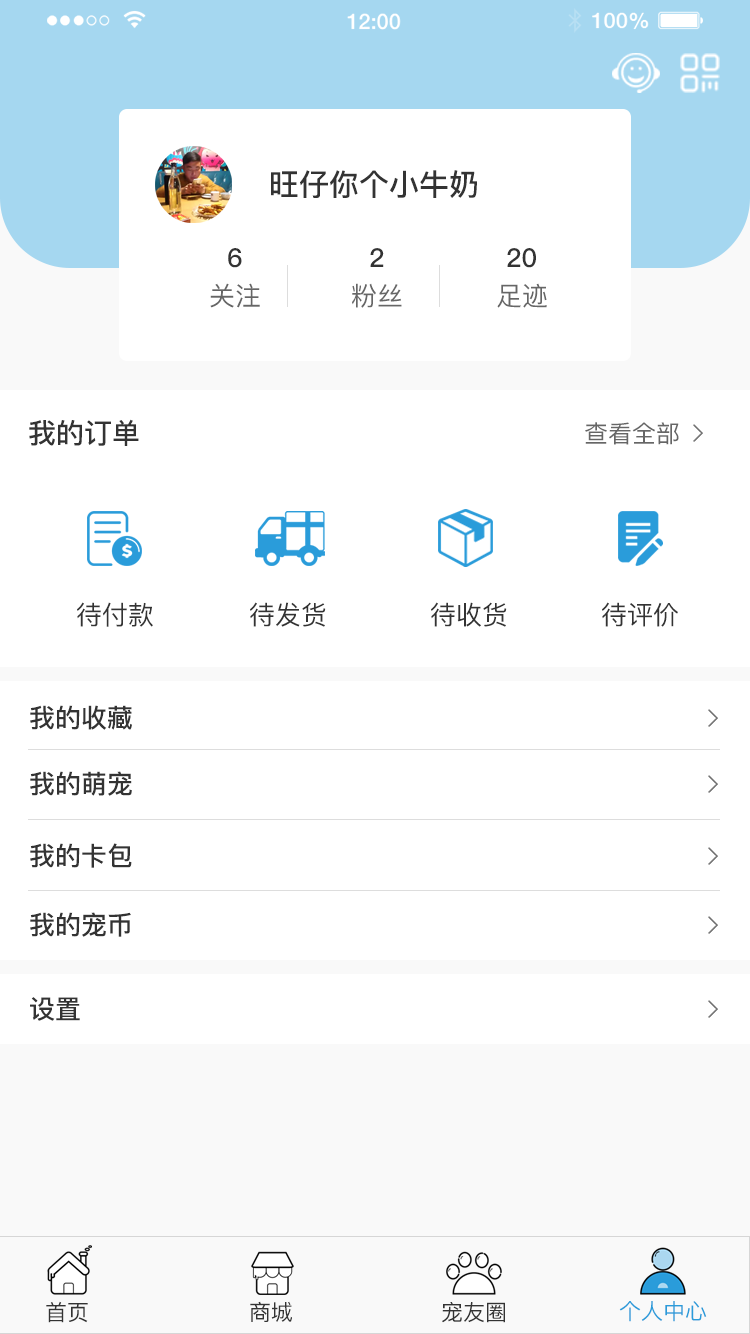
<style>
.page{position:relative;width:750px;height:1334px;background:#ffffff}
.page>*{position:absolute;margin:0}
.t1{font:30px "PingFangSC-Medium";color:#333333}
.t2{font:26px "PingFangSC-Medium";color:#333333}
.t3{font:26px "PingFangSC-Regular";color:#666666}
.t4{font:28px "PingFangSC-Medium";color:#333333}
.t5{font:24px "PingFangSC-Regular";color:#666666}
.t6{font:26px "PingFangSC-Regular";color:#333333}
.t7{font:22px "PingFangSC-Regular";color:#333333}
.t8{font:22px "PingFangSC-Regular";color:#2a9cda}
</style>
<div class="page">
<p class="t1" style="left:271px;top:170px;width:206px;height:28px">旺仔你个小牛奶</p>
<p class="t2" style="left:228px;top:248px;width:14px;height:20px">6</p>
<p class="t2" style="left:370px;top:248px;width:14px;height:19px">2</p>
<p class="t2" style="left:507px;top:248px;width:29px;height:20px">20</p>
<p class="t3" style="left:210px;top:283px;width:50px;height:25px">关注</p>
<p class="t3" style="left:352px;top:283px;width:50px;height:25px">粉丝</p>
<p class="t3" style="left:497px;top:283px;width:50px;height:25px">足迹</p>
<p class="t4" style="left:29px;top:419px;width:110px;height:27px">我的订单</p>
<p class="t5" style="left:585px;top:422px;width:94px;height:23px">查看全部</p>
<p class="t6" style="left:77px;top:602px;width:76px;height:25px">待付款</p>
<p class="t6" style="left:250px;top:602px;width:76px;height:25px">待发货</p>
<p class="t6" style="left:431px;top:602px;width:76px;height:25px">待收货</p>
<p class="t6" style="left:602px;top:602px;width:76px;height:25px">待评价</p>
<p class="t2" style="left:30px;top:705px;width:102px;height:25px">我的收藏</p>
<p class="t2" style="left:30px;top:771px;width:102px;height:25px">我的萌宠</p>
<p class="t2" style="left:30px;top:843px;width:102px;height:25px">我的卡包</p>
<p class="t2" style="left:30px;top:912px;width:101px;height:25px">我的宠币</p>
<p class="t2" style="left:30px;top:997px;width:50px;height:24px">设置</p>
<p class="t7" style="left:46px;top:1301px;width:42px;height:22px">首页</p>
<p class="t7" style="left:250px;top:1301px;width:42px;height:21px">商城</p>
<p class="t7" style="left:442px;top:1302px;width:63px;height:21px">宠友圈</p>
<p class="t8" style="left:619px;top:1301px;width:88px;height:21px">个人中心</p>
</div>
